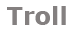
<style>
.page{position:relative;width:80px;height:30px;background:#ffffff}
.page>*{position:absolute;margin:0}
.t1{font:24px "Verdana-Bold";color:#848080}
</style>
<div class="page">
<p class="t1" style="left:7px;top:6px;width:59px;height:19px">Troll</p>
</div>
